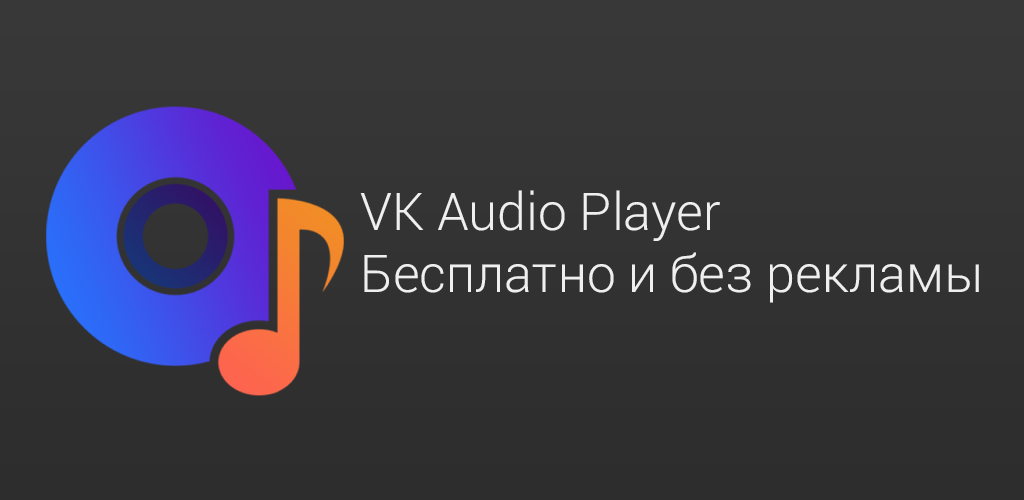
<style>
.page{position:relative;width:1024px;height:500px}
.page>*{position:absolute;margin:0}
.t1{font:52px "Roboto-Light";color:#efefef}
</style>
<div class="page">
<p class="t1" style="left:360px;top:190px;width:619px;height:113px">VK Audio Player<br>Бесплатно и без рекламы</p>
</div>
